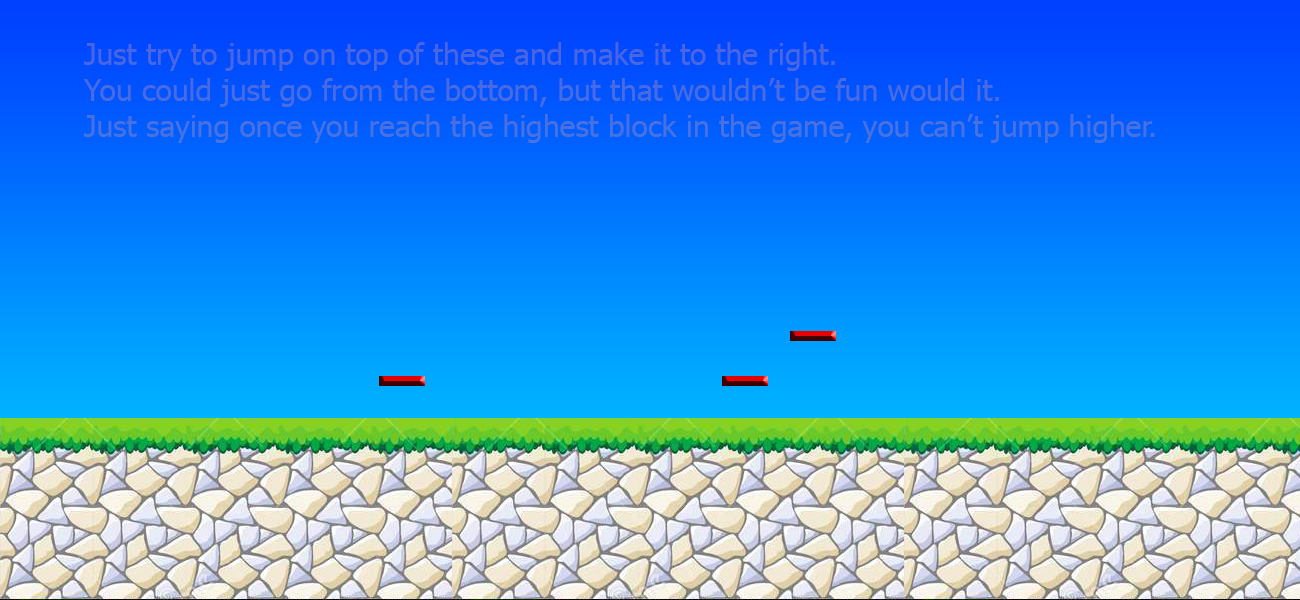
<style>
.page{position:relative;width:1300px;height:600px}
.page>*{position:absolute;margin:0}
.t1{font:30px "Tahoma";color:#496ce1}
</style>
<div class="page">
<p class="t1" style="left:84px;top:42px;width:1071px;height:101px">Just try to jump on top of these and make it to the right. <br>You could just go from the bottom, but that wouldn’t be fun would it.<br>Just saying once you reach the highest block in the game, you can’t jump higher.</p>
</div>
